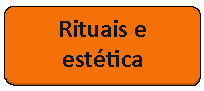
<style>
.page{position:relative;width:204px;height:91px;background:#f47107}
.page>*{position:absolute;margin:0}
.t1{font:25px "Calibri-Bold";color:#141619}
</style>
<div class="page">
<p class="t1" style="left:60px;top:20px;width:86px;height:47px;text-align:center">Rituais e <br>estética</p>
</div>
